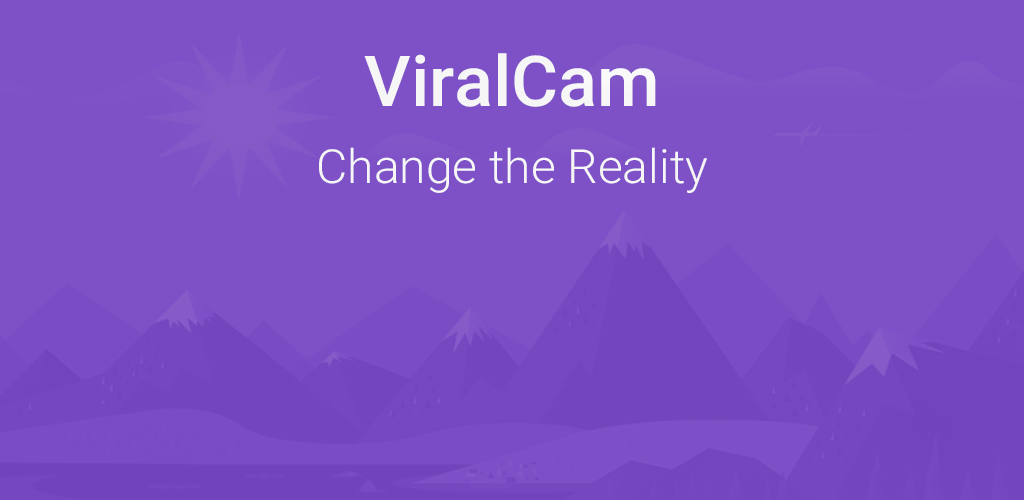
<style>
.page{position:relative;width:1024px;height:500px;background:#7e51c7}
.page>*{position:absolute;margin:0}
.t1{font:70.3px "Roboto-Medium";color:#ffffff}
.t2{font:46.9px "Roboto-Light";color:#ffffff}
</style>
<div class="page">
<p class="t1" style="left:364px;top:53px;width:292px;height:54px">ViralCam</p>
<p class="t2" style="left:319px;top:147px;width:388px;height:46px">Change the Reality</p>
</div>
